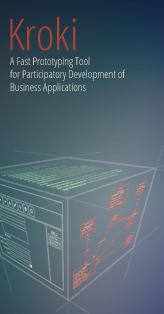
<style>
.page{position:relative;width:164px;height:314px}
.page>*{position:absolute;margin:0}
.t1{font:43.9px "OpenSans-CondensedLight";color:#b1483c}
.t2{font:11px "OpenSans-CondensedLight"}
</style>
<div class="page">
<p class="t1" style="left:10px;top:16px;width:66px;height:35px">Kroki</p>
<p class="t2" style="left:10px;top:56px;width:115px;height:38px">A Fast Prototyping Tool <br>for Participatory Development of <br>Business Applications</p>
</div>
